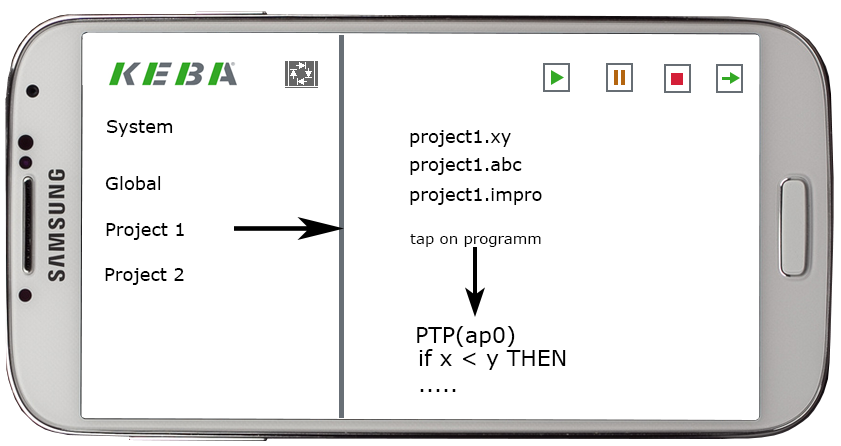
<style>
.page{position:relative;width:841px;height:446px;background:#ffffff}
.page>*{position:absolute;margin:0}
.t1{font:18px "Verdana";color:#000000}
.t2{font:15px "Verdana";color:#000000}
.t3{font:22px "Verdana";color:#000000}
</style>
<div class="page">
<p class="t1" style="left:107px;top:120px;width:66px;height:17px">System</p>
<p class="t1" style="left:410px;top:130px;width:101px;height:17px">project1.xy</p>
<p class="t1" style="left:410px;top:157px;width:112px;height:18px">project1.abc</p>
<p class="t1" style="left:105px;top:176px;width:56px;height:14px">Global</p>
<p class="t1" style="left:410px;top:188px;width:132px;height:17px">project1.impro</p>
<p class="t1" style="left:106px;top:223px;width:78px;height:17px">Project 1</p>
<p class="t2" style="left:410px;top:234px;width:131px;height:13px">tap on programm</p>
<p class="t1" style="left:105px;top:268px;width:79px;height:17px">Project 2</p>
<p class="t3" style="left:417px;top:326px;width:98px;height:21px">PTP(ap0)</p>
<p class="t3" style="left:419px;top:349px;width:147px;height:43px">if x &lt; y THEN<br>.....</p>
</div>
